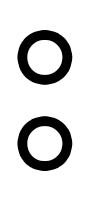
<style>
.page{position:relative;width:89px;height:200px;background:#ffffff}
.page>*{position:absolute;margin:0}
.t1{font:204.2px "YuGothic-Bold";color:#ffffff}
</style>
<div class="page">
<p class="t1" style="left:27px;top:40px;width:36px;height:121px">：</p>
</div>
